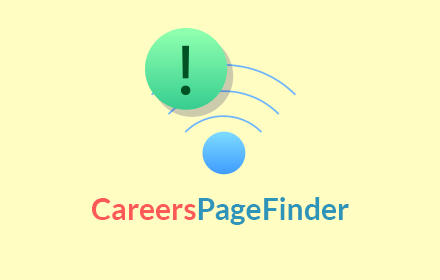
<style>
.page{position:relative;width:440px;height:280px;background:#fffdc1}
.page>*{position:absolute;margin:0}
.t1{font:30px "Lato-Bold";color:#2e94b9}
.t2{font:30px "Lato-Bold";color:#fd5959}
</style>
<div class="page">
<p class="t1" style="left:92px;top:197px;width:257px;height:28px"><span class="t2">Careers</span>PageFinder</p>
</div>
